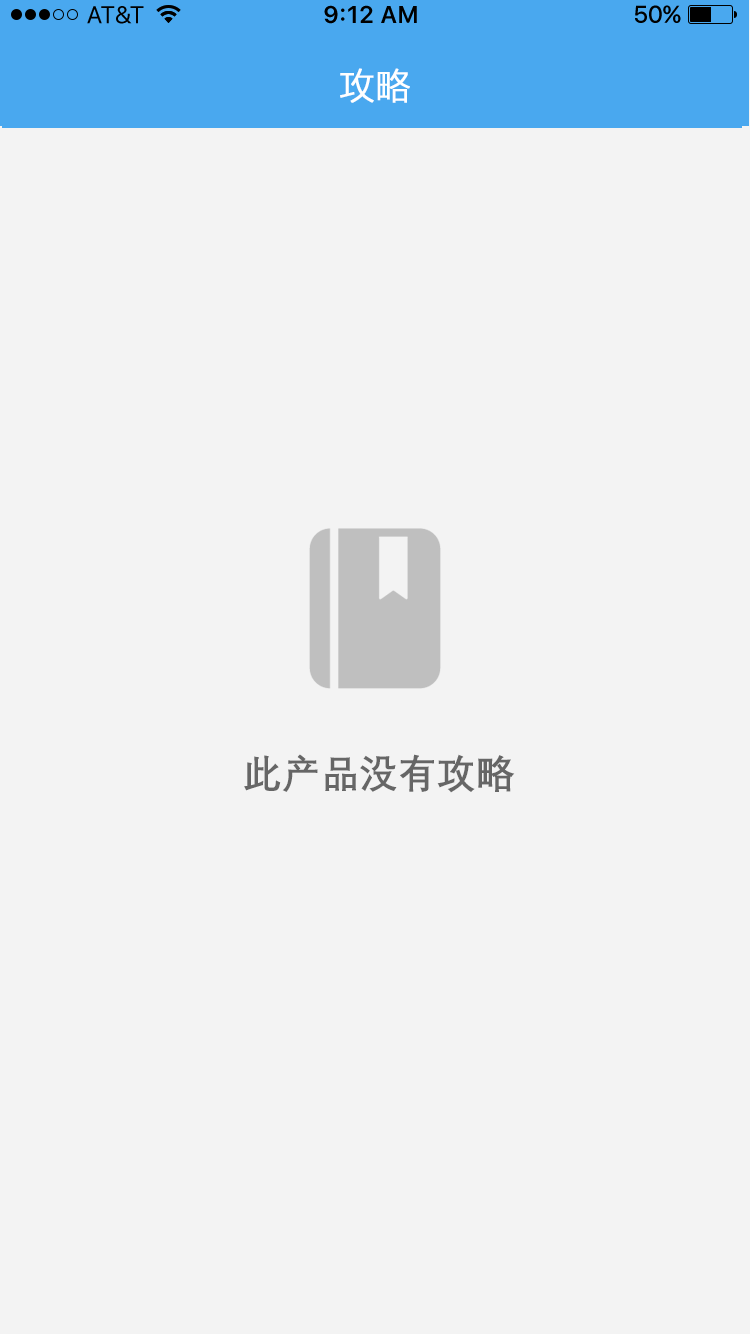
<style>
.page{position:relative;width:750px;height:1334px;background:#f3f3f3}
.page>*{position:absolute;margin:0}
.t1{font:36px "MicrosoftYaHeiLight";color:#ffffff;font-weight:bold;scale:0.97 1}
.t2{font:40px "DengXian-Bold";color:#666666;scale:0.97 1}
</style>
<div class="page">
<p class="t1" style="left:340px;top:68px;width:70px;height:35px">攻略</p>
<p class="t2" style="left:244px;top:754px;width:271px;height:39px">此产品没有攻略</p>
</div>
